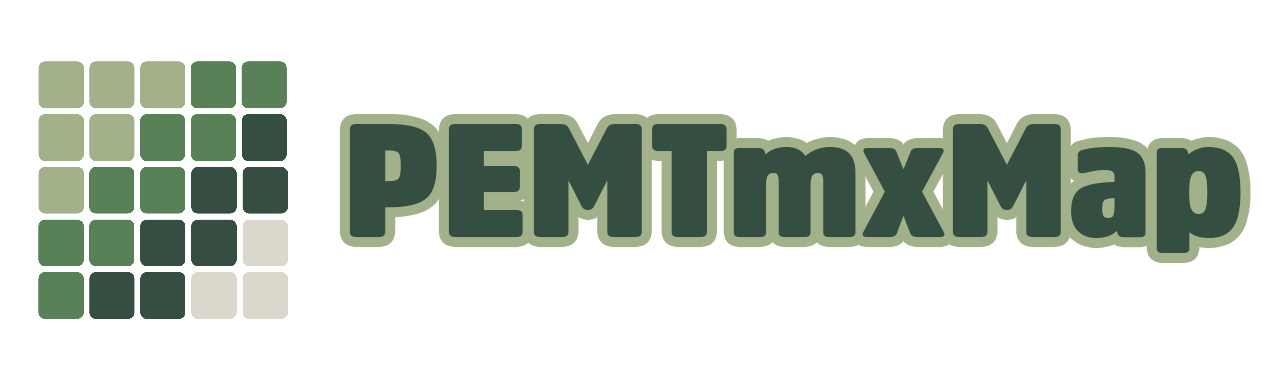
<style>
.page{position:relative;width:1280px;height:384px;background:#ffffff}
.page>*{position:absolute;margin:0}
.t1{font:159.2px "AmsiProCond-Ultra";color:#344e41;scale:1.21 1}
</style>
<div class="page">
<p class="t1" style="left:349px;top:124px;width:892px;height:129px">PEMTmxMap</p>
</div>
